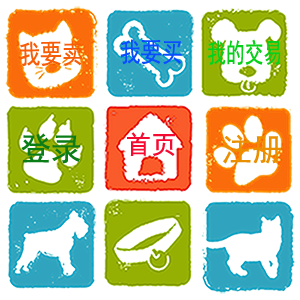
<style>
.page{position:relative;width:300px;height:300px;background:#ffffff}
.page>*{position:absolute;margin:0}
.t1{font:27px "SimHei";color:#f75c07;scale:0.8 1}
.t2{font:27px "SimHei";color:#084eff;scale:0.78 1}
.t3{font:27px "SimHei";color:#07cf1a;scale:0.7 1}
.t4{font:32.1px "SimHei";color:#0b7d16;scale:0.96 1}
.t5{font:25.3px "SimHei";color:#f50b31}
.t6{font:30.8px "SimHei";color:#e98f00}
</style>
<div class="page">
<p class="t1" style="left:20px;top:40px;width:63px;height:27px;rotate:-1deg">我要卖</p>
<p class="t2" style="left:120px;top:39px;width:62px;height:26px">我要买</p>
<p class="t3" style="left:208px;top:39px;width:73px;height:26px">我的交易</p>
<p class="t4" style="left:21px;top:133px;width:60px;height:31px">登录</p>
<p class="t5" style="left:127px;top:132px;width:48px;height:24px">首页</p>
<p class="t6" style="left:223px;top:134px;width:59px;height:30px">注册</p>
</div>
